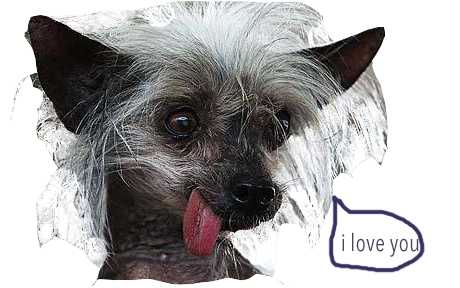
<style>
.page{position:relative;width:460px;height:288px;background:#ffffff}
.page>*{position:absolute;margin:0}
.t1{font:24px "AvenirNextCondensed-Regular";color:#4a455d}
</style>
<div class="page">
<p class="t1" style="left:342px;top:232px;width:83px;height:25px">i love you.</p>
</div>
